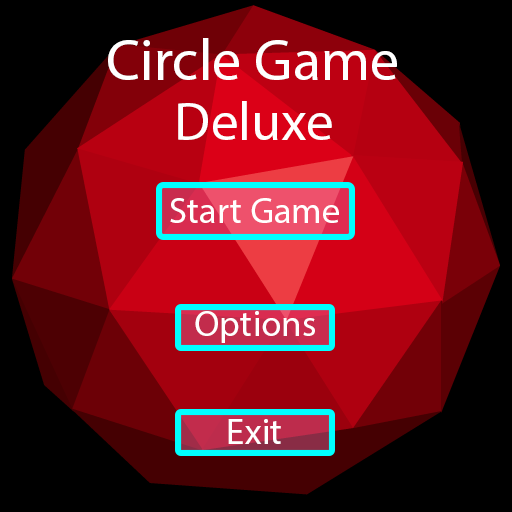
<style>
.page{position:relative;width:512px;height:512px;background:#000000}
.page>*{position:absolute;margin:0}
.t1{font:58px "MyriadPro-Regular";color:#ffffff}
.t2{font:53.8px "MyriadPro-Regular";color:#ffffff}
.t3{font:36.6px "MyriadPro-Regular";color:#ffffff}
</style>
<div class="page">
<p class="t1" style="left:108px;top:38px;width:289px;height:42px">Circle Game</p>
<p class="t2" style="left:178px;top:101px;width:154px;height:39px">Deluxe</p>
<p class="t3" style="left:170px;top:198px;width:169px;height:25px">Start Game</p>
<p class="t3" style="left:195px;top:311px;width:120px;height:32px">Options</p>
<p class="t3" style="left:228px;top:419px;width:53px;height:25px">Exit</p>
</div>
